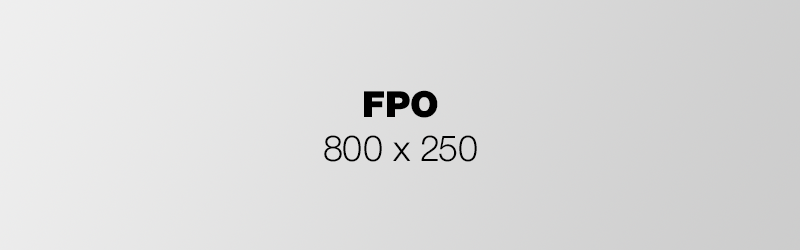
<style>
.page{position:relative;width:800px;height:250px}
.page>*{position:absolute;margin:0}
.t1{font:36px/24px "HelveticaNeueLTPro-Lt";color:#000000}
.t2{font:36px/24px "HelveticaNeueLTPro-Blk";color:#000000}
</style>
<div class="page">
<p class="t1" style="left:324px;top:90px;width:153px;height:72px;text-align:center"><span class="t2">FPO<br></span>800 x 250</p>
</div>
